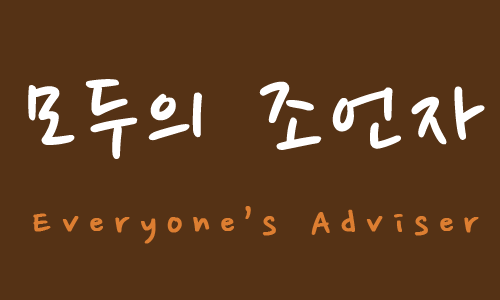
<style>
.page{position:relative;width:500px;height:300px;background:#553215}
.page>*{position:absolute;margin:0}
.t1{font:120px "NanumPen";letter-spacing:0.1em;color:#ffffff}
.t2{font:40px "NanumPen";letter-spacing:-0.01em;color:#dd7e31;font-weight:bold}
</style>
<div class="page">
<p class="t1" style="left:28px;top:79px;width:457px;height:80px">모두의 조언자</p>
<p class="t2" style="left:33px;top:206px;width:446px;height:38px">E v e r y o n e ’ s   A d v i s e r</p>
</div>
